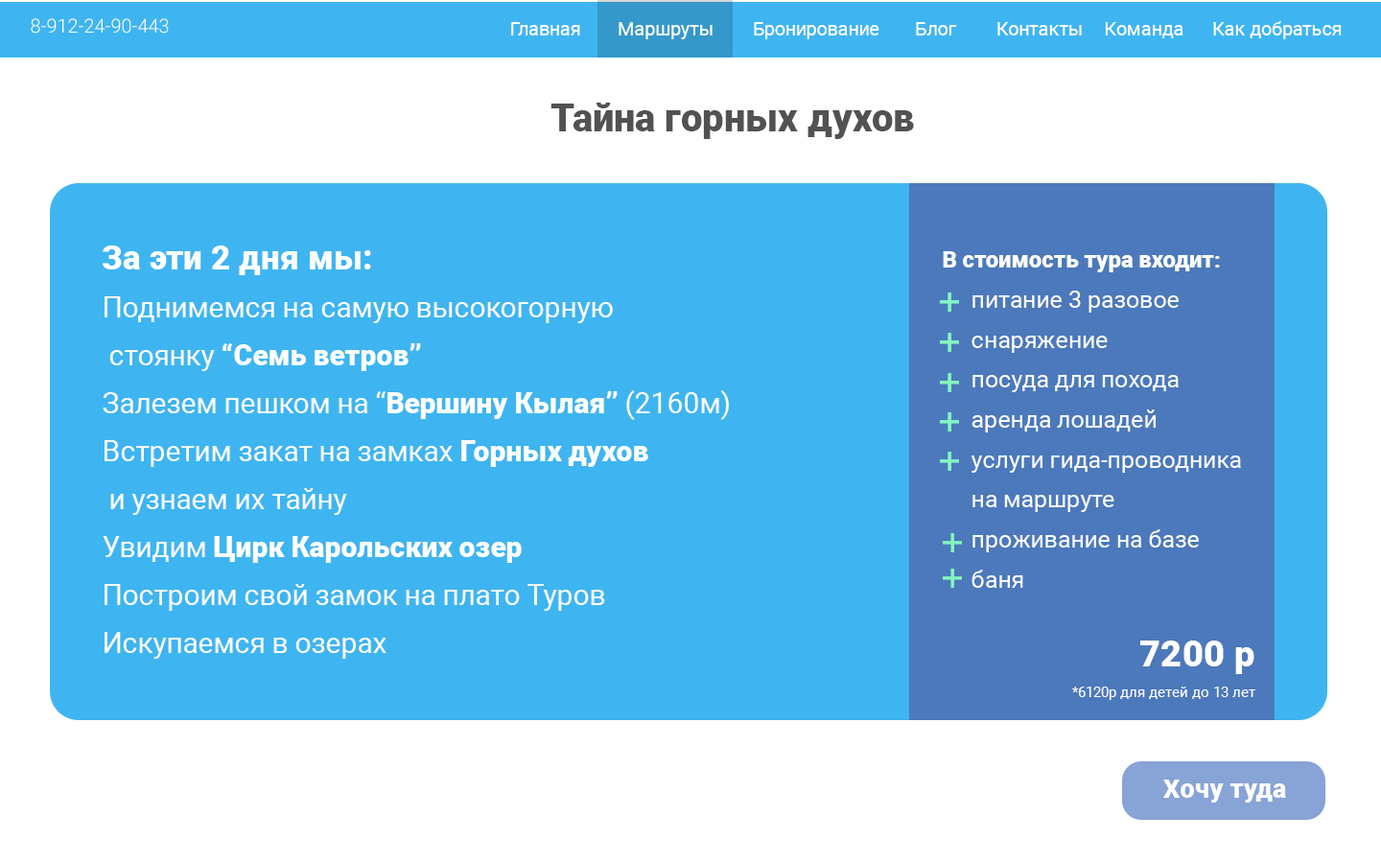
<style>
.page{position:relative;width:1381px;height:863px;background:#3eb5f1}
.page>*{position:absolute;margin:0}
.t1{font:19.2px "Roboto-Light";color:#ffffff}
.t2{font:18.8px "Roboto-Regular";color:#ffffff}
.t3{font:38.4px "Roboto-Black";color:#535151}
.t4{font:28.8px/48px "Roboto-Regular";color:#ffffff}
.t5{font:33.6px/48px "Roboto-Black";color:#ffffff}
.t6{font:28.8px/48px "Roboto-Black";color:#ffffff}
.t7{font:24px/40px "Roboto-Regular";color:#ffffff}
.t8{font:22.5px/40px "Roboto-Black";color:#ffffff}
.t9{font:36.7px "Roboto-Black";color:#ffffff}
.t10{font:14.4px "Roboto-Regular";color:#ffffff}
.t11{font:26.2px "Roboto-Black";color:#ffffff}
</style>
<div class="page">
<p class="t1" style="left:31px;top:18px;width:138px;height:16px">8-912-24-90-443</p>
<p class="t2" style="left:511px;top:21px;width:831px;height:18px">Главная  Маршруты  Бронирование  Блог  Контакты Команда  Как добраться</p>
<p class="t3" style="left:551px;top:103px;width:363px;height:36px">Тайна горных духов</p>
<p class="t4" style="left:103px;top:246px;width:626px;height:413px"><span class="t5">За эти 2 дня мы: <br></span>Поднимемся на самую высокогорную <br> стоянку <span class="t6">“Семь ветров”<br></span>Залезем пешком на “<span class="t6">Вершину Кылая” </span>(2160м)<br>Встретим закат на замках <span class="t6">Горных духов <br></span> и узнаем их тайну<br>Увидим <span class="t6">Цирк Карольских озер<br></span>Построим свой замок на плато Туров<br>Искупаемся в озерах</p>
<p class="t7" style="left:943px;top:251px;width:298px;height:337px"><span class="t8">В стоимость тура входит:<br> </span>питание 3 разовое<br> снаряжение<br> посуда для похода<br> аренда лошадей<br> услуги гида-проводника<br>  на маршруте<br> проживание на базе<br> баня</p>
<p class="t9" style="left:1141px;top:641px;width:114px;height:33px">7200 р</p>
<p class="t10" style="left:1072px;top:687px;width:184px;height:13px">*6120р для детей до 13 лет</p>
<p class="t11" style="left:1164px;top:780px;width:122px;height:23px">Хочу туда</p>
</div>
